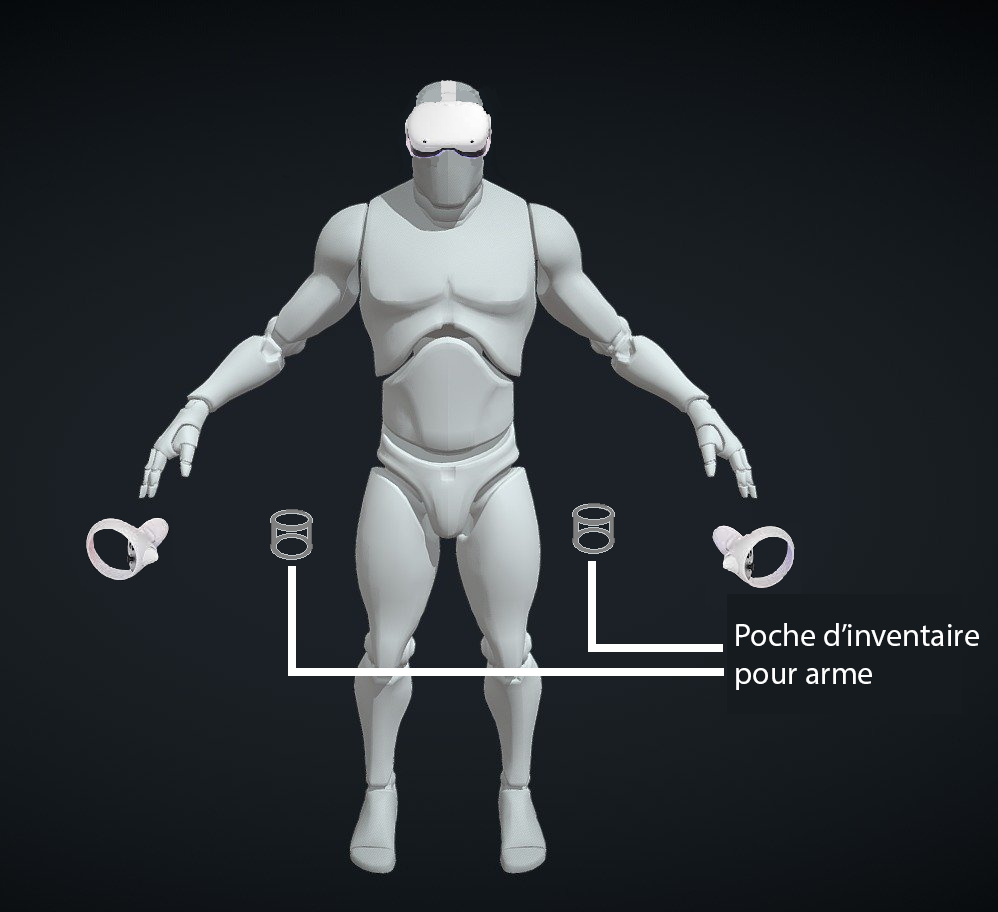
<style>
.page{position:relative;width:998px;height:912px}
.page>*{position:absolute;margin:0}
.t1{font:32px "MyriadPro-Regular";color:#ffffff}
</style>
<div class="page">
<p class="t1" style="left:736px;top:623px;width:243px;height:67px">Poche d’inventaire<br>pour arme</p>
</div>
